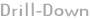
<style>
.page{position:relative;width:90px;height:20px;background:#ffffff}
.page>*{position:absolute;margin:0}
.t1{font:15.9px "ArchitecturePlain";color:#aaaaaa;scale:1.8 1}
</style>
<div class="page">
<p class="t1" style="left:1px;top:2px;width:88px;height:15px">Drill-Down</p>
</div>
